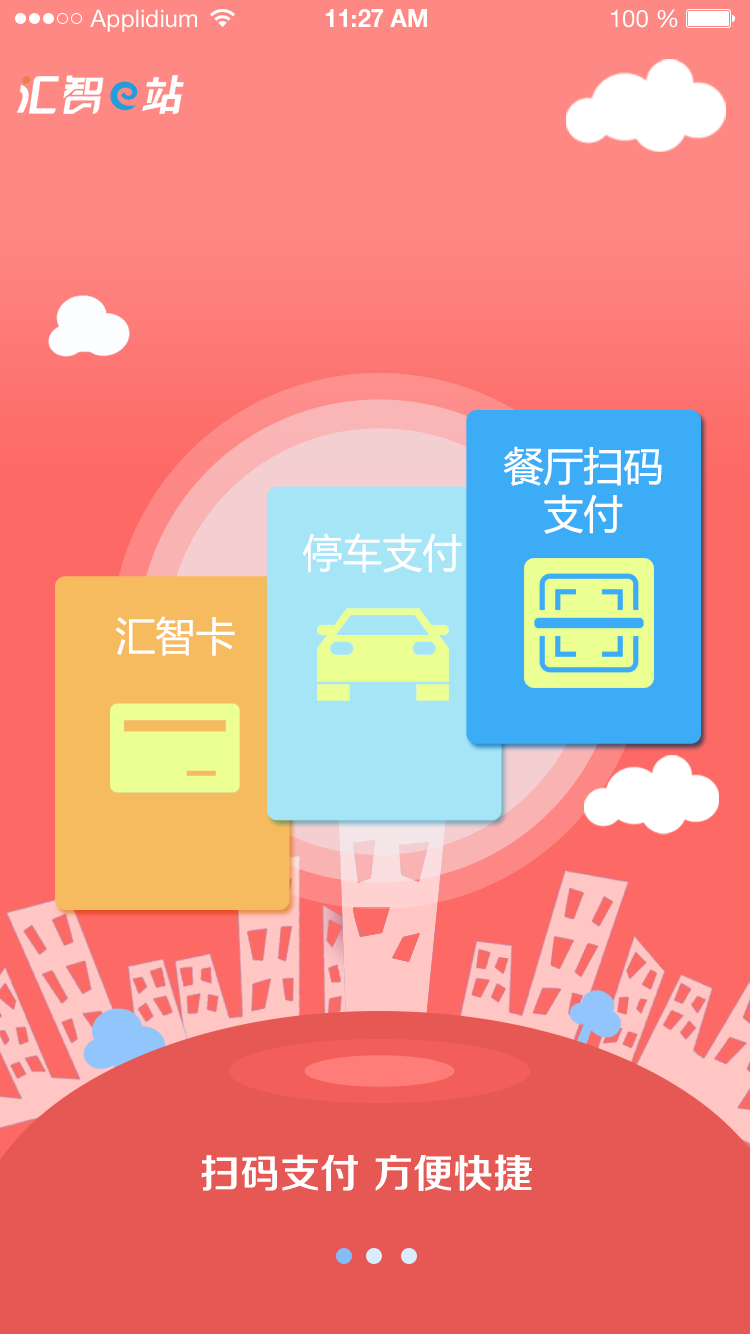
<style>
.page{position:relative;width:750px;height:1334px}
.page>*{position:absolute;margin:0}
.t1{font:24px "HelveticaNeueLTStd-Roman";color:#ffffff}
.t2{font:24px "HelveticaNeueLTStd-Bd";color:#ffffff}
.t3{font:40px/48px "MicrosoftYaHei";color:#ffffff;text-transform:uppercase}
.t4{font:40px "MicrosoftYaHei";color:#ffffff;text-transform:uppercase}
.t5{font:40px "FZZZHONGJW--GB1-0";color:#ffffff;text-transform:uppercase}
</style>
<div class="page">
<p class="t1" style="left:90px;top:9px;width:107px;height:23px">Applidium</p>
<p class="t2" style="left:325px;top:9px;width:102px;height:18px">11:27 AM</p>
<p class="t1" style="left:611px;top:9px;width:67px;height:19px">100 %</p>
<p class="t3" style="left:503px;top:446px;width:159px;height:88px;text-align:center">餐厅扫码<br>支付</p>
<p class="t4" style="left:302px;top:533px;width:160px;height:40px">停车支付</p>
<p class="t4" style="left:115px;top:616px;width:120px;height:40px">汇智卡</p>
<p class="t5" style="left:201px;top:1154px;width:331px;height:37px">扫码支付 方便快捷</p>
</div>
